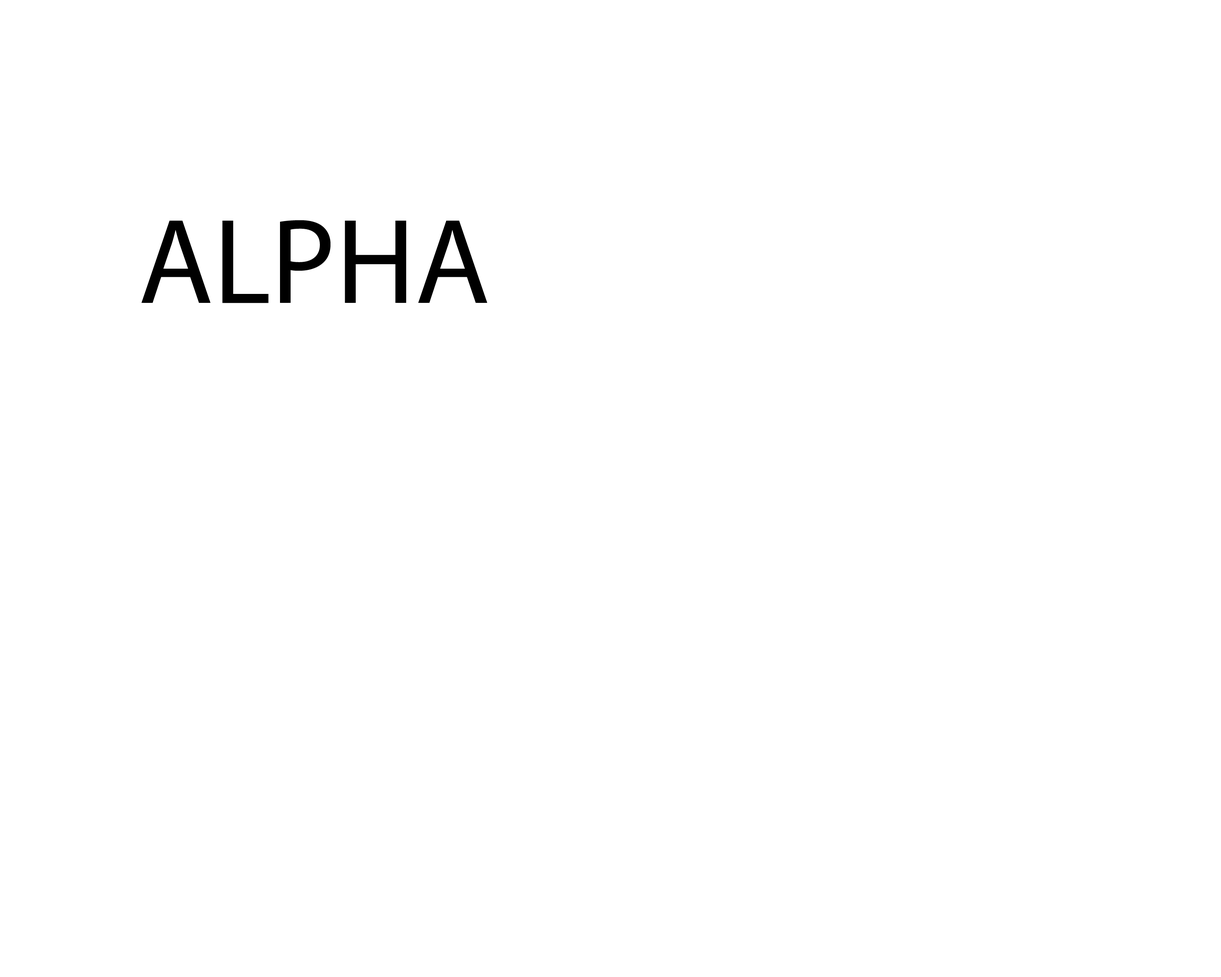
<style>
.page{position:relative;width:1221px;height:977px;background:#ffffff}
.page>*{position:absolute;margin:0}
.t1{font:122.1px "MyriadPro-Regular";color:#000000}
</style>
<div class="page">
<p class="t1" style="left:141px;top:220px;width:346px;height:83px">ALPHA</p>
</div>
